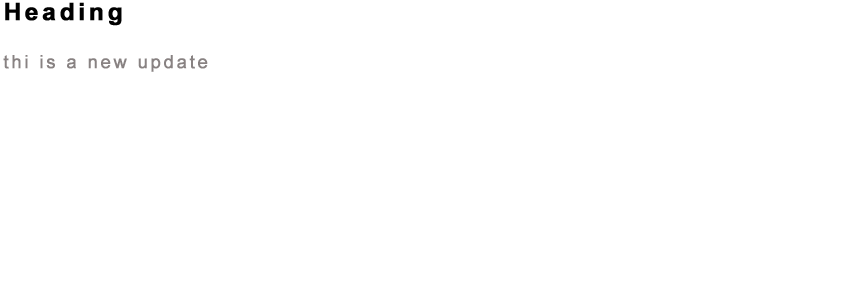
<style>
.page{position:relative;width:847px;height:288px;background:#ffffff}
.page>*{position:absolute;margin:0}
.t1{font:18px/24px "ArialMT";letter-spacing:0.14em;color:#888282;font-weight:bold}
.t2{font:24px/24px "Arial-BoldMT";letter-spacing:0.14em;color:#000000;font-weight:bold}
</style>
<div class="page">
<p class="t1" style="left:3px;top:2px;width:205px;height:70px"><span class="t2">Heading<br><br></span>thi is a new update</p>
</div>
